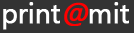
<style>
.page{position:relative;width:134px;height:33px;background:#333333}
.page>*{position:absolute;margin:0}
.t1{font:28.5px "Ebrima";letter-spacing:-0.025em;color:#ffffff;font-weight:bold}
.t2{font:28.5px "Ebrima";letter-spacing:-0.025em;color:#ff0000;font-weight:bold;font-style:italic}
</style>
<div class="page">
<p class="t1" style="left:3px;top:2px;width:126px;height:28px">print<span class="t2">@</span>mit</p>
</div>
